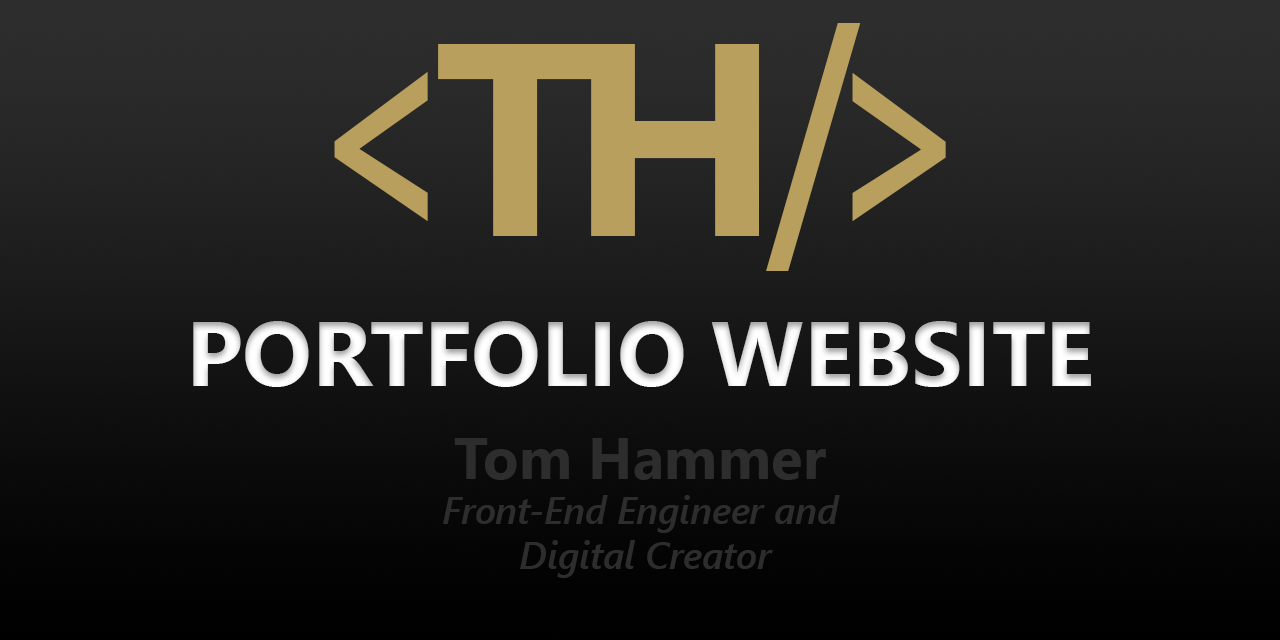
<style>
.page{position:relative;width:1280px;height:640px}
.page>*{position:absolute;margin:0}
.t1{font:303.8px "SegoeUI-Semibold";letter-spacing:-0.1em;color:#b89f5d;scale:0.7 1}
.t2{font:274.3px "SegoeUI-Bold";letter-spacing:-0.1em;color:#b89f5d}
.t3{font:274.3px "SegoeUI-Bold";letter-spacing:-0.04em;color:#b89f5d}
.t4{font:303.8px "SegoeUI-Semibold";letter-spacing:-0.155em;color:#b89f5d;scale:0.7 1}
.t5{font:303.8px "SegoeUI-Semibold";letter-spacing:-0.12em;color:#b89f5d;scale:0.7 1}
.t6{font:91.7px "SegoeUI-Bold";color:#ffffff;text-transform:uppercase}
.t7{font:37.5px "SegoeUI-SemiboldItalic";color:#2d2d2d}
.t8{font:58.3px "SegoeUI-Bold";color:#2d2d2d}
</style>
<div class="page">
<p class="t1" style="left:334px;top:23px;width:612px;height:248px">&lt;<span class="t2">T</span><span class="t3">H</span><span class="t4">/</span><span class="t5">&gt;</span></p>
<p class="t6" style="left:193px;top:321px;width:898px;height:66px">Portfolio Website</p>
<p class="t7" style="left:443px;top:438px;width:397px;height:140px;text-align:center"><span class="t8">Tom Hammer<br></span>Front-End Engineer and<br> Digital Creator</p>
</div>
